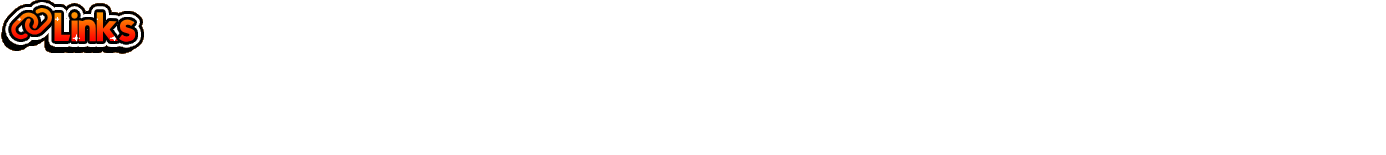
<style>
.page{position:relative;width:1386px;height:155px;background:#ffffff}
.page>*{position:absolute;margin:0}
.t1{font:40px "Mouser"}
</style>
<div class="page">
<p class="t1" style="left:54px;top:12px;width:82px;height:30px">Links</p>
<p class="t1" style="left:54px;top:12px;width:82px;height:30px">Links</p>
</div>
